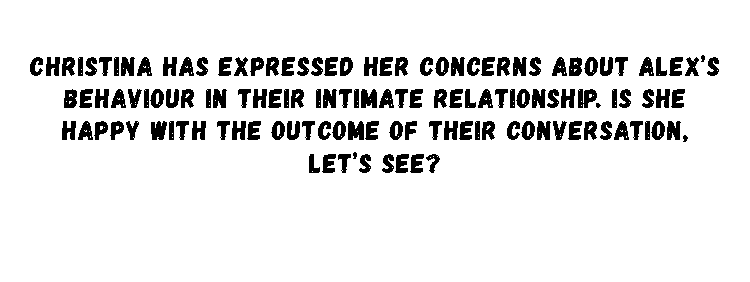
<style>
.page{position:relative;width:750px;height:282px;background:#ffffff}
.page>*{position:absolute;margin:0}
.t1{font:27px "Gagalin-Regular";letter-spacing:0.038em;color:#000000}
</style>
<div class="page">
<p class="t1" style="left:30px;top:55px;width:689px;height:118px;text-align:center">Christina has expressed her concerns about Alex’s behaviour in their intimate relationship. Is she happy with the outcome of their conversation, let’s see?</p>
</div>
